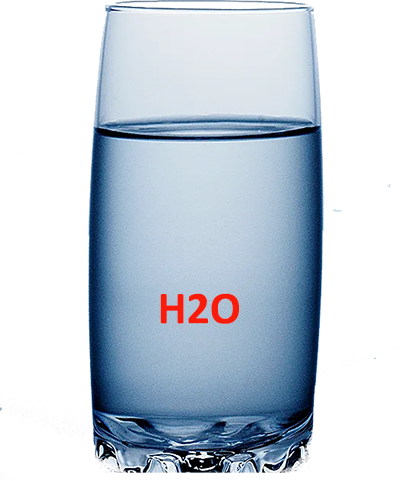
<style>
.page{position:relative;width:400px;height:481px;background:#ffffff}
.page>*{position:absolute;margin:0}
.t1{font:45.8px "Calibri-Bold";color:#fa1c0b}
</style>
<div class="page">
<p class="t1" style="left:160px;top:293px;width:79px;height:31px">H2O</p>
</div>
